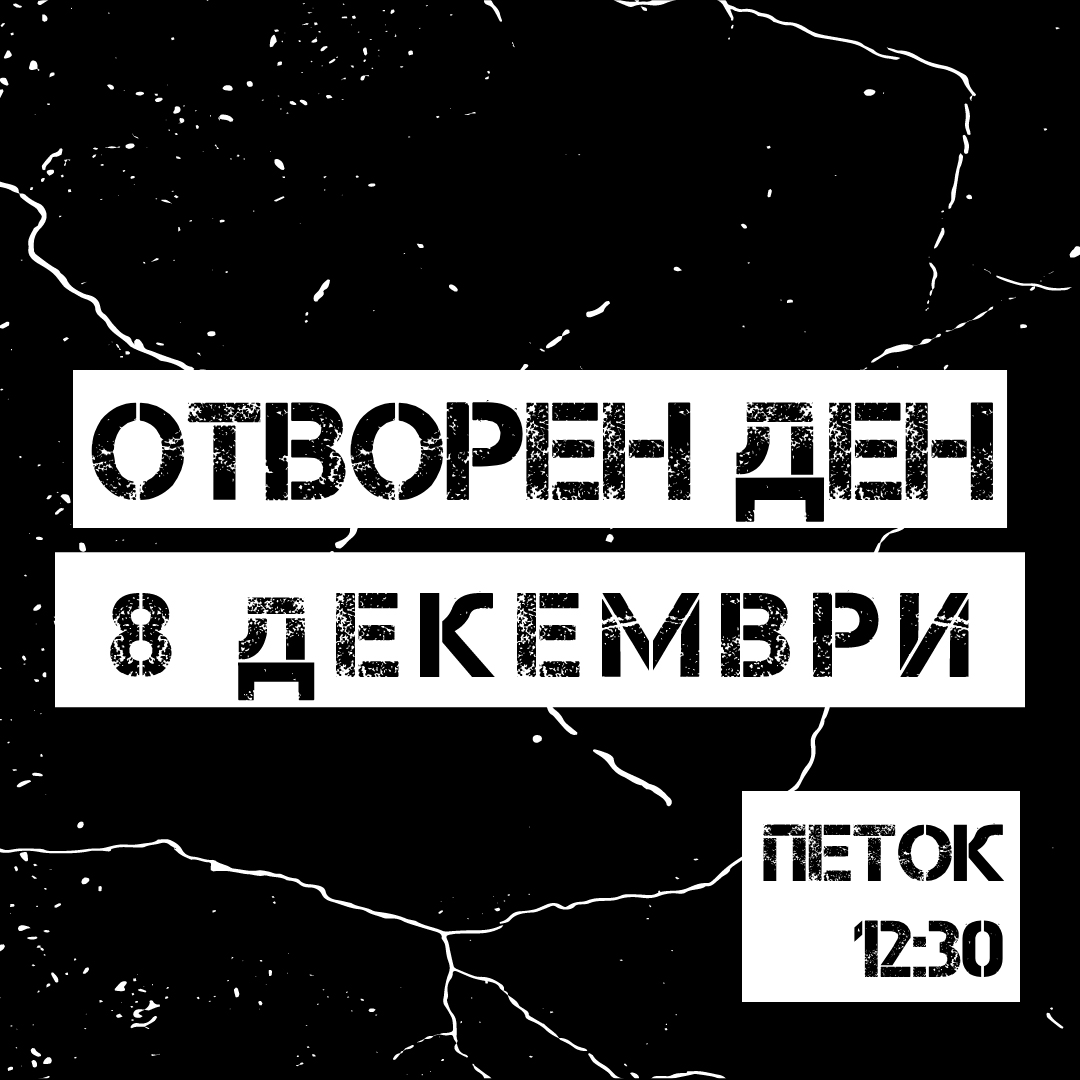
<style>
.page{position:relative;width:1080px;height:1080px;background:#000000}
.page>*{position:absolute;margin:0}
.t1{font:138.8px "Captureit";color:#000000}
.t2{font:80.5px "Captureit";color:#000000}
</style>
<div class="page">
<p class="t1" style="left:91px;top:400px;width:902px;height:122px">Отворен ден</p>
<p class="t2" style="left:763px;top:823px;width:241px;height:154px;text-align:right">петок<br>12:30</p>
</div>
